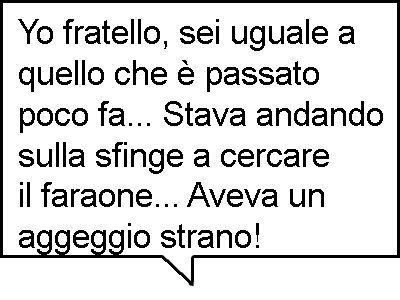
<style>
.page{position:relative;width:400px;height:300px;background:#ffffff}
.page>*{position:absolute;margin:0}
.t1{font:34px "ArialMT";color:#000000}
</style>
<div class="page">
<p class="t1" style="left:18px;top:19px;width:365px;height:236px">Yo fratello, sei uguale a<br>quello che è passato<br>poco fa... Stava andando<br>sulla sfinge a cercare<br>il faraone... Aveva un<br>aggeggio strano!</p>
</div>
